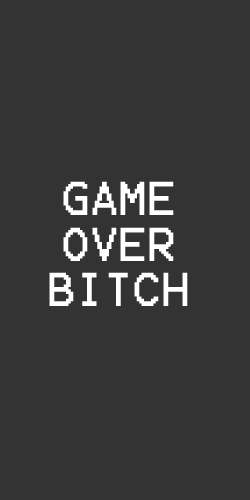
<style>
.page{position:relative;width:250px;height:500px;background:#333333}
.page>*{position:absolute;margin:0}
.t1{font:38px "Terminal";color:#ffffff}
</style>
<div class="page">
<p class="t1" style="left:49px;top:181px;width:139px;height:125px;text-align:center">GAME<br>OVER<br>BITCH</p>
</div>
